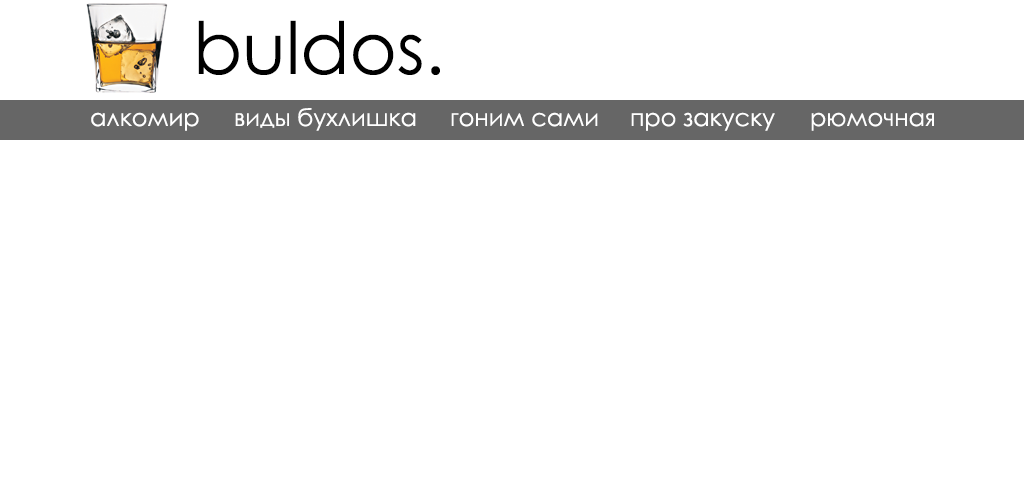
<style>
.page{position:relative;width:1024px;height:500px;background:#ffffff}
.page>*{position:absolute;margin:0}
.t1{font:72px "CenturyGothic";color:#000000}
.t2{font:24px "CenturyGothic";color:#ffffff}
</style>
<div class="page">
<p class="t1" style="left:198px;top:20px;width:242px;height:55px">buldos.</p>
<p class="t2" style="left:91px;top:108px;width:843px;height:23px">алкомир виды бухлишка гоним сами про закуску рюмочная</p>
</div>
